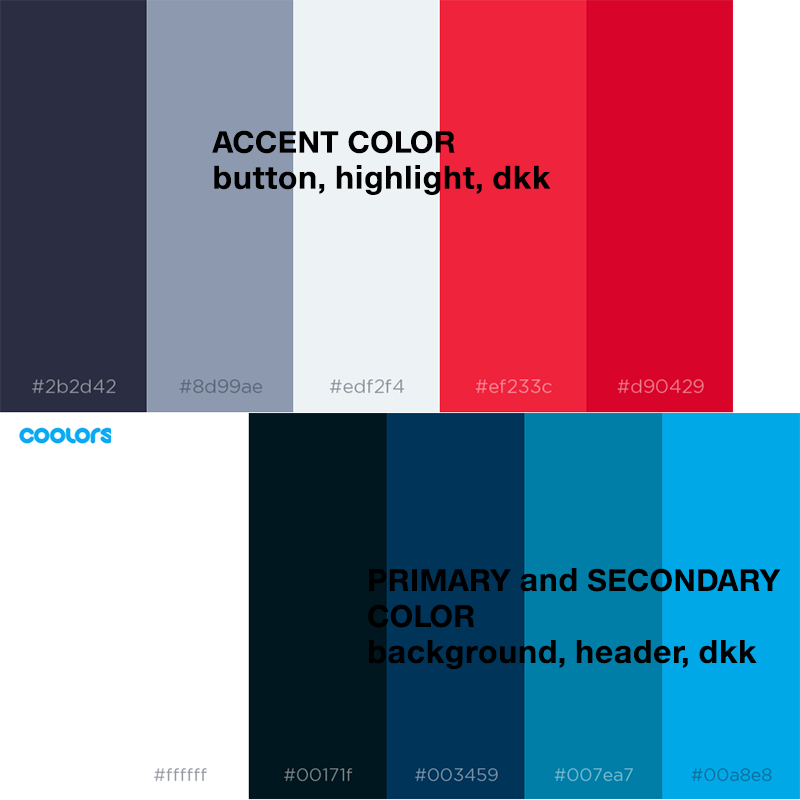
<style>
.page{position:relative;width:800px;height:800px}
.page>*{position:absolute;margin:0}
.t1{font:30px "HelveticaNeueeTextPro-Bold";color:#000000}
</style>
<div class="page">
<p class="t1" style="left:212px;top:130px;width:339px;height:65px;text-align:justify">ACCENT COLOR<br>button, highlight, dkk</p>
<p class="t1" style="left:368px;top:568px;width:413px;height:102px;text-align:justify">PRIMARY and SECONDARY<br>COLOR<br>background, header, dkk</p>
</div>
